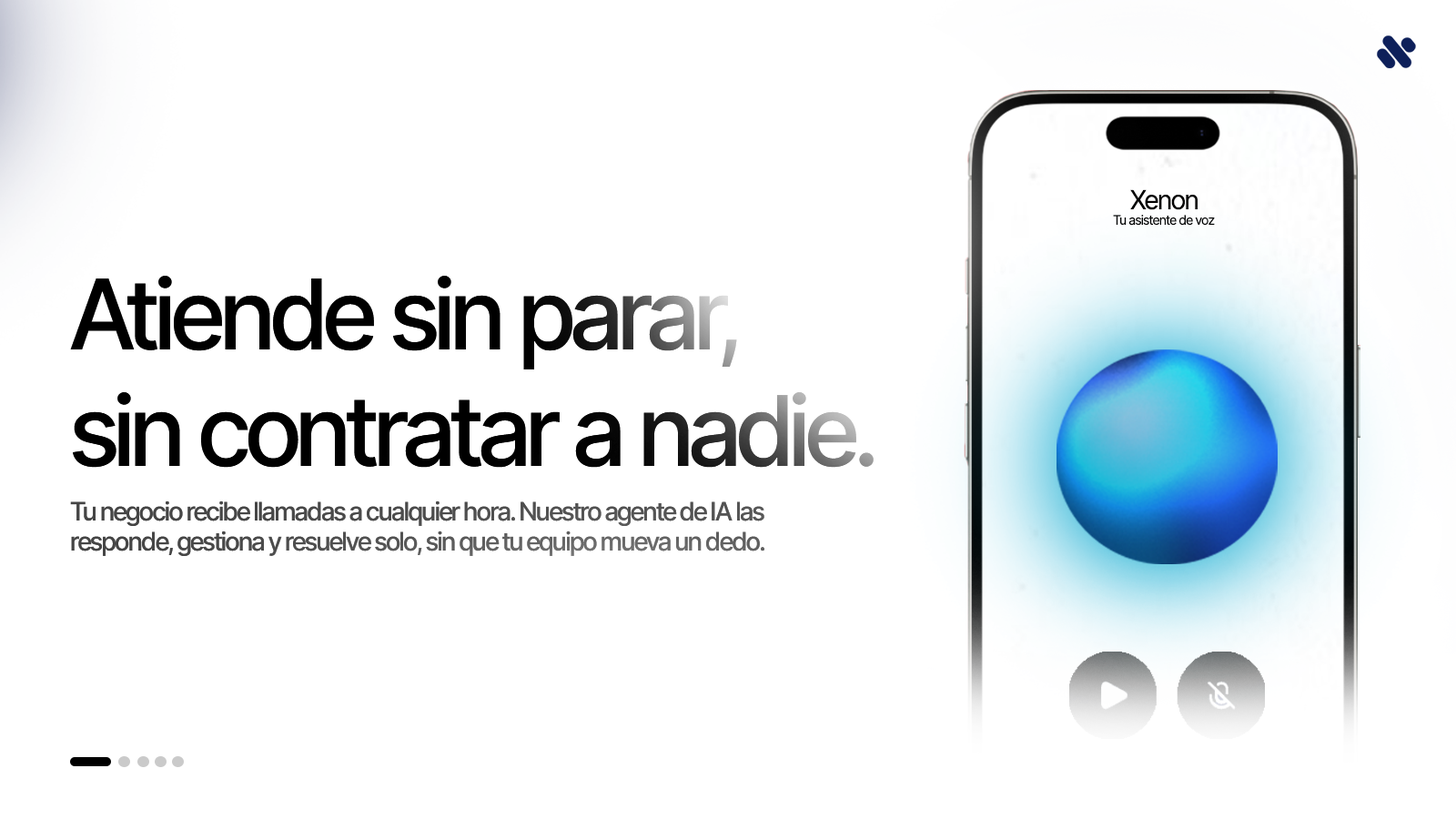
<style>
.page{position:relative;width:1456px;height:819px;background:#ffffff}
.page>*{position:absolute;margin:0}
.t1{font:26.1px "Inter-Regular";letter-spacing:-0.075em;color:#000000}
.t2{font:13px "Inter-Regular";letter-spacing:-0.075em;color:#000000}
.t3{font:97.3px "Inter-Medium";letter-spacing:-0.082em;color:#000000}
.t4{font:25.3px "Inter-Medium";letter-spacing:-0.082em;color:#505050}
</style>
<div class="page">
<p class="t1" style="left:1130px;top:189px;width:68px;height:21px">Xenon</p>
<p class="t2" style="left:1113px;top:215px;width:102px;height:11px">Tu asistente de voz</p>
<p class="t3" style="left:70px;top:276px;width:804px;height:192px">Atiende sin parar, <br>sin contratar a nadie.</p>
<p class="t4" style="left:70px;top:500px;width:694px;height:56px">Tu negocio recibe llamadas a cualquier hora. Nuestro agente de IA las <br>responde, gestiona y resuelve solo, sin que tu equipo mueva un dedo.</p>
</div>
